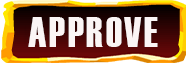
<style>
.page{position:relative;width:186px;height:63px}
.page>*{position:absolute;margin:0}
.t1{font:42px "Haettenschweiler";letter-spacing:0.06em;color:#fbf5f5}
</style>
<div class="page">
<p class="t1" style="left:28px;top:17px;width:130px;height:30px">APPROVE</p>
</div>
